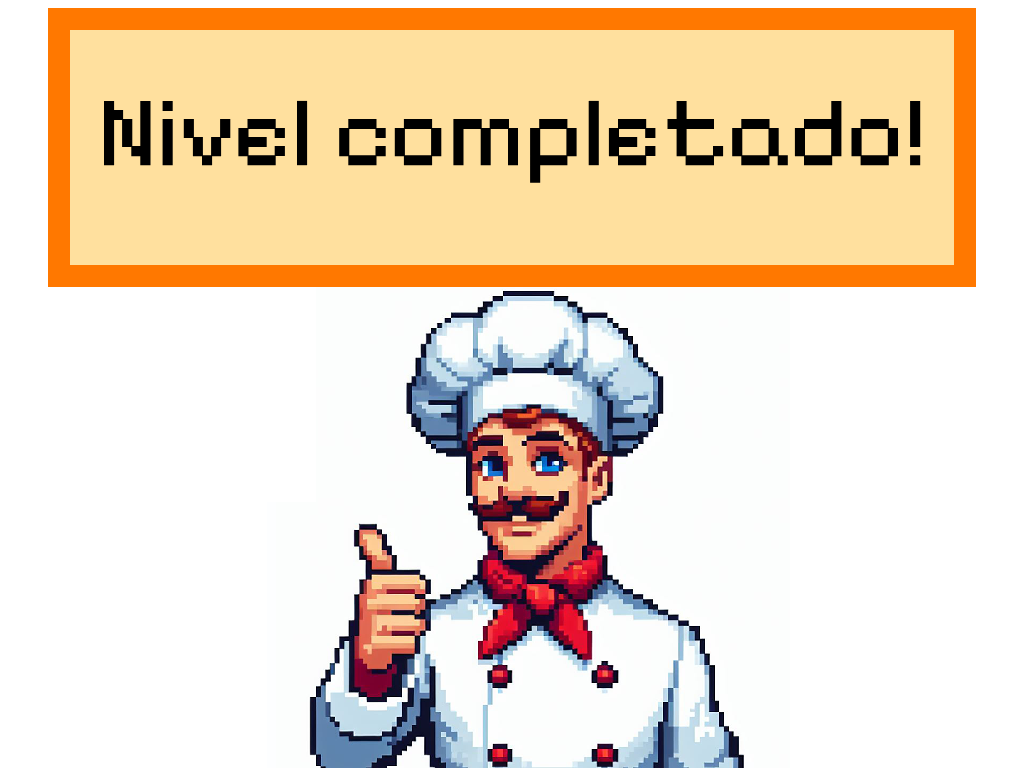
<style>
.page{position:relative;width:1024px;height:768px;background:#ffffff}
.page>*{position:absolute;margin:0}
.t1{font:100px "PixelifySans-Regular";color:#000000}
</style>
<div class="page">
<p class="t1" style="left:103px;top:100px;width:818px;height:83px">Nivel completado!</p>
</div>
